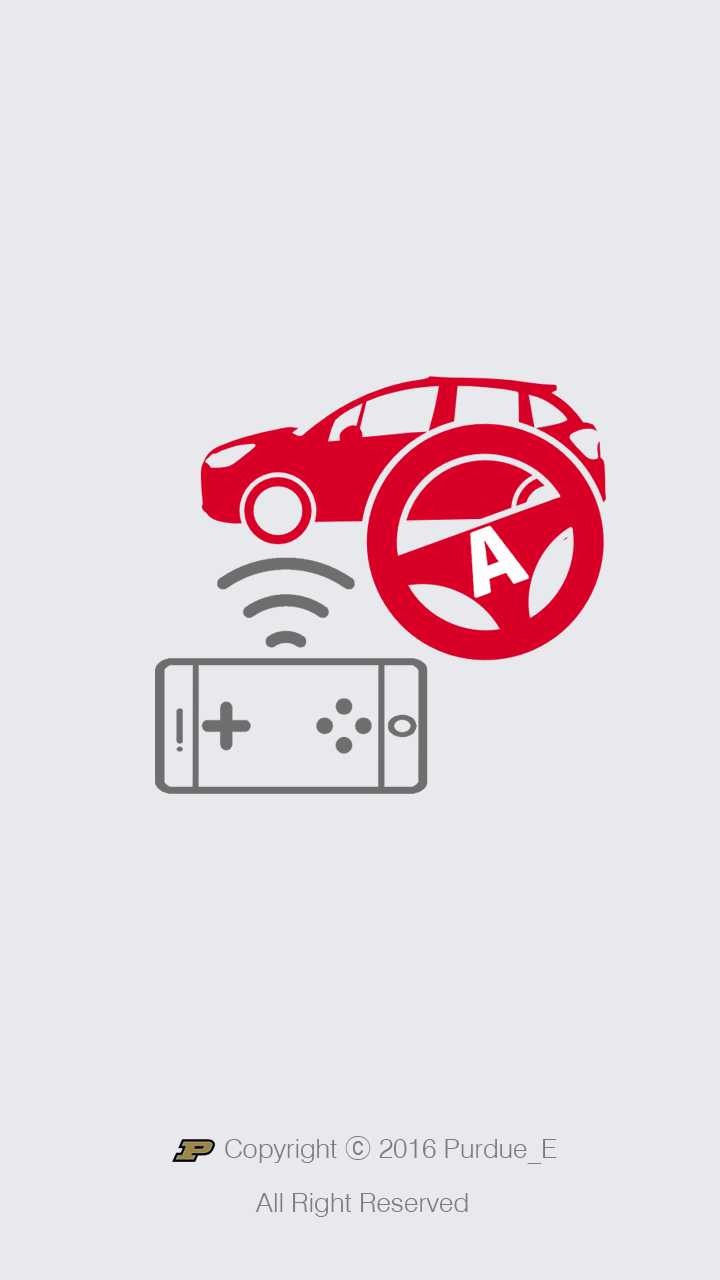
<style>
.page{position:relative;width:720px;height:1280px;background:#e7e9ed}
.page>*{position:absolute;margin:0}
.t1{font:27px "Swis721-BT";color:#7d7d7d}
.t2{font:27px "Gulim";color:#7d7d7d}
</style>
<div class="page">
<p class="t1" style="left:225px;top:1136px;width:332px;height:28px">Copyright <span class="t2">ⓒ</span> 2016 Purdue_E</p>
<p class="t1" style="left:255px;top:1193px;width:213px;height:24px">All Right Reserved</p>
</div>
